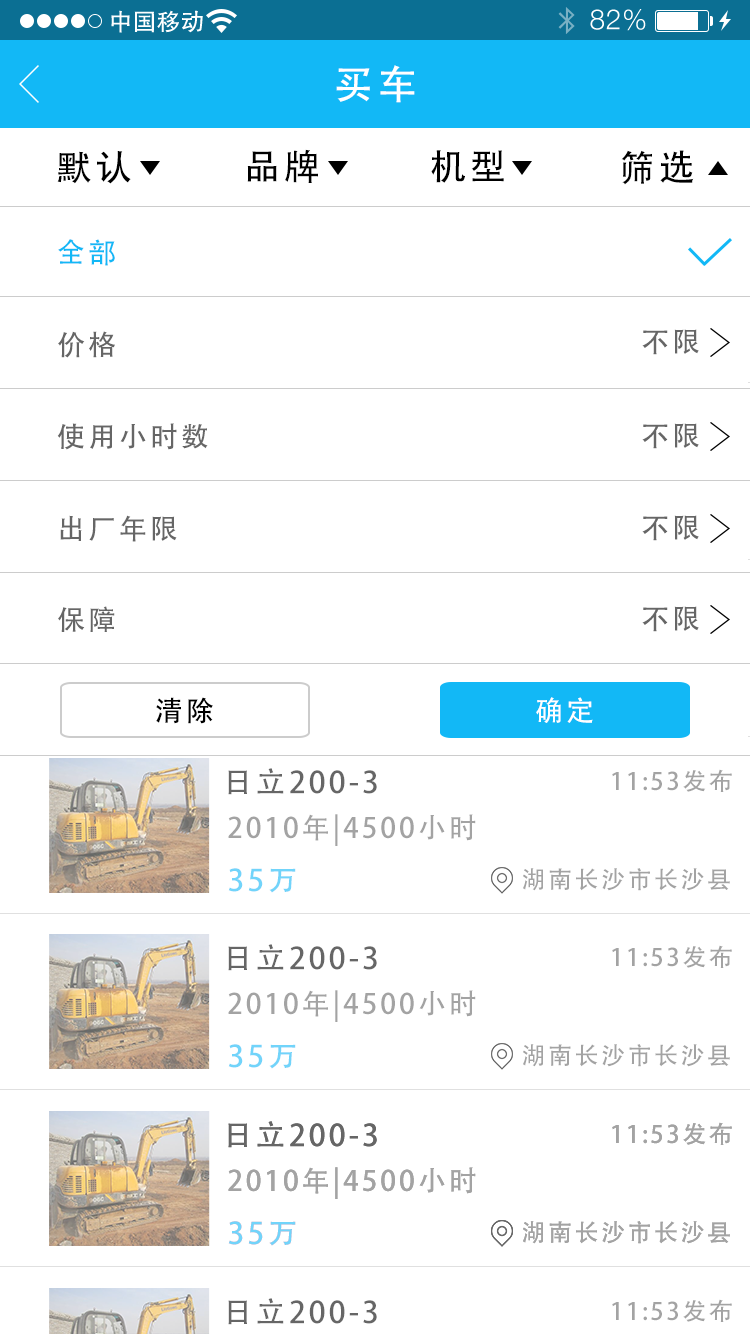
<style>
.page{position:relative;width:750px;height:1334px;background:#ffffff}
.page>*{position:absolute;margin:0}
.t1{font:40px "AdobeHeitiStd-Regular";letter-spacing:0.104em;color:#ffffff}
.t2{font:36px "AdobeHeitiStd-Regular";letter-spacing:0.104em;color:#000000}
.t3{font:28px "AdobeHeitiStd-Regular";letter-spacing:0.104em;color:#12b8f6}
.t4{font:28px "AdobeHeitiStd-Regular";letter-spacing:0.104em;color:#666666}
.t5{font:28px "AdobeHeitiStd-Regular";letter-spacing:0.104em;color:#000000}
.t6{font:28px "AdobeHeitiStd-Regular";letter-spacing:0.104em;color:#ffffff}
.t7{font:30px "AdobeHeitiStd-Regular";letter-spacing:0.104em;color:#666666}
.t8{font:24px "AdobeHeitiStd-Regular";letter-spacing:0.104em;color:#a3a3a3}
.t9{font:28px "AdobeHeitiStd-Regular";letter-spacing:0.104em;color:#a3a3a3}
.t10{font:30px "AdobeHeitiStd-Regular";letter-spacing:0.104em;color:#71d4fa}
</style>
<div class="page">
<p class="t1" style="left:336px;top:65px;width:79px;height:38px">买车</p>
<p class="t2" style="left:247px;top:149px;width:71px;height:34px">品牌</p>
<p class="t2" style="left:431px;top:150px;width:73px;height:33px">机型</p>
<p class="t2" style="left:621px;top:150px;width:73px;height:35px">筛选</p>
<p class="t2" style="left:57px;top:151px;width:74px;height:33px">默认</p>
<p class="t3" style="left:58px;top:239px;width:57px;height:27px">全部</p>
<p class="t4" style="left:642px;top:329px;width:57px;height:26px">不限</p>
<p class="t4" style="left:58px;top:331px;width:57px;height:27px">价格</p>
<p class="t4" style="left:57px;top:423px;width:151px;height:27px">使用小时数</p>
<p class="t4" style="left:642px;top:423px;width:57px;height:26px">不限</p>
<p class="t4" style="left:60px;top:515px;width:117px;height:27px">出厂年限</p>
<p class="t4" style="left:642px;top:515px;width:57px;height:26px">不限</p>
<p class="t4" style="left:58px;top:606px;width:57px;height:26px">保障</p>
<p class="t4" style="left:642px;top:606px;width:57px;height:26px">不限</p>
<p class="t5" style="left:156px;top:697px;width:57px;height:27px">清除</p>
<p class="t6" style="left:536px;top:697px;width:57px;height:26px">确定</p>
<p class="t7" style="left:228px;top:768px;width:149px;height:27px">日立200-3</p>
<p class="t8" style="left:612px;top:769px;width:120px;height:23px">11:53发布</p>
<p class="t9" style="left:228px;top:814px;width:248px;height:32px">2010年|4500小时</p>
<p class="t10" style="left:228px;top:868px;width:68px;height:25px">35万</p>
<p class="t8" style="left:523px;top:868px;width:207px;height:23px">湖南长沙市长沙县</p>
<p class="t7" style="left:228px;top:944px;width:149px;height:27px">日立200-3</p>
<p class="t8" style="left:612px;top:945px;width:120px;height:23px">11:53发布</p>
<p class="t9" style="left:228px;top:990px;width:248px;height:32px">2010年|4500小时</p>
<p class="t10" style="left:228px;top:1044px;width:68px;height:25px">35万</p>
<p class="t8" style="left:523px;top:1044px;width:207px;height:23px">湖南长沙市长沙县</p>
<p class="t7" style="left:228px;top:1121px;width:149px;height:27px">日立200-3</p>
<p class="t7" style="left:228px;top:1121px;width:149px;height:27px">日立200-3</p>
<p class="t8" style="left:612px;top:1122px;width:120px;height:23px">11:53发布</p>
<p class="t8" style="left:612px;top:1122px;width:120px;height:23px">11:53发布</p>
<p class="t9" style="left:228px;top:1167px;width:248px;height:32px">2010年|4500小时</p>
<p class="t9" style="left:228px;top:1167px;width:248px;height:32px">2010年|4500小时</p>
<p class="t10" style="left:228px;top:1221px;width:68px;height:25px">35万</p>
<p class="t10" style="left:228px;top:1221px;width:68px;height:25px">35万</p>
<p class="t8" style="left:523px;top:1221px;width:207px;height:23px">湖南长沙市长沙县</p>
<p class="t8" style="left:523px;top:1221px;width:207px;height:23px">湖南长沙市长沙县</p>
<p class="t7" style="left:228px;top:1298px;width:149px;height:27px">日立200-3</p>
<p class="t8" style="left:612px;top:1299px;width:120px;height:23px">11:53发布</p>
</div>
